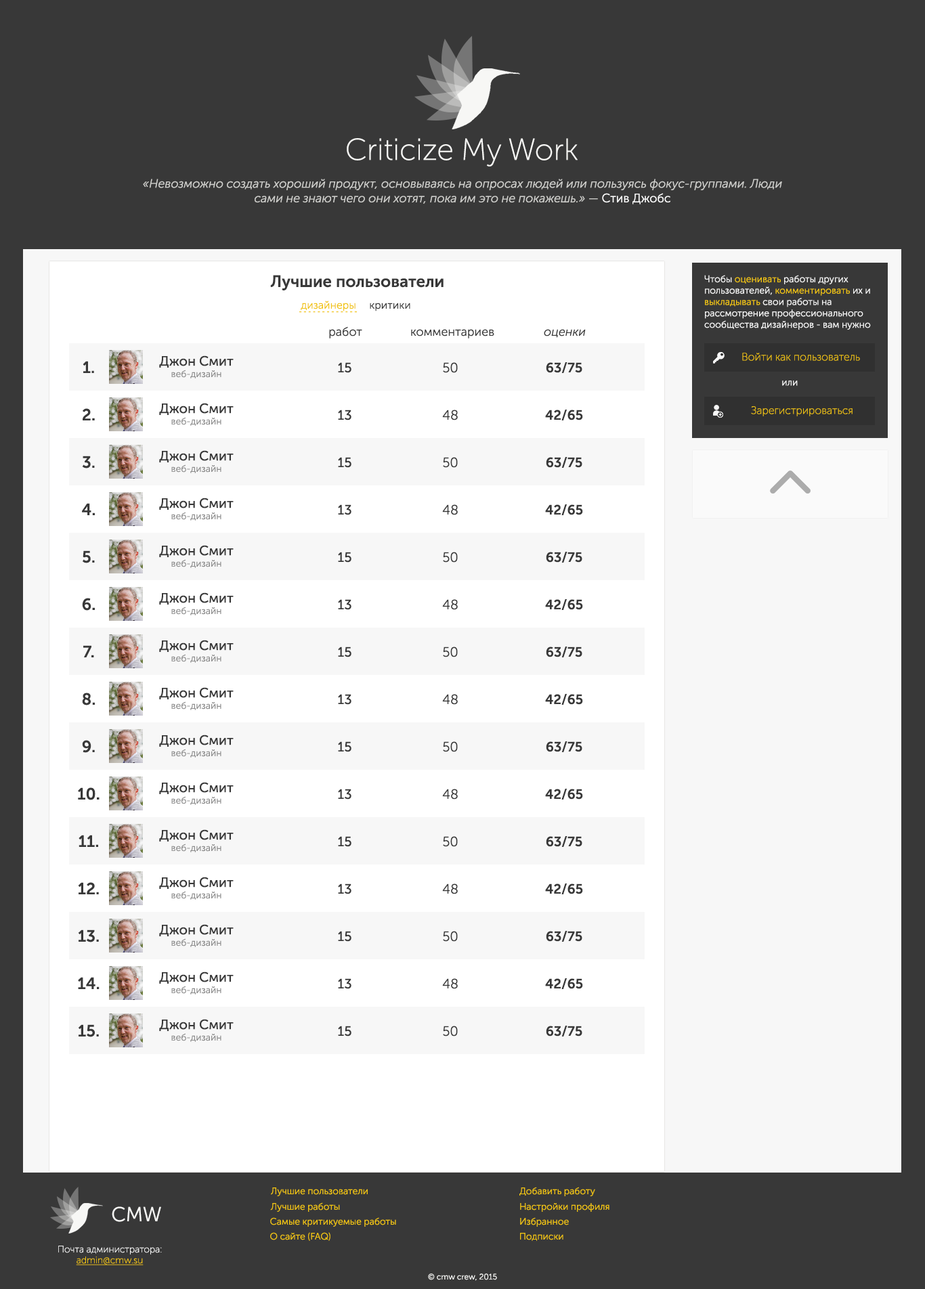
<style>
.page{position:relative;width:925px;height:1289px;background:#383838}
.page>*{position:absolute;margin:0}
.t1{font:30.5px "MuseoSansCyrl-100";color:#f7f7f5}
.t2{font:12.2px "MuseoSansCyrl-300Italic";color:#cfcfcc}
.t3{font:12.2px "MuseoSansCyrl-300";color:#cfcfcc}
.t4{font:12.2px "MuseoSansCyrl-300";color:#ffffff}
.t5{font:16.3px "MuseoSansCyrl-700";color:#383838}
.t6{font:9.5px "MuseoSansCyrl-300";color:#f7f7f7}
.t7{font:9.5px "MuseoSansCyrl-300";color:#f1c40f}
.t8{font:10.8px "MuseoSansCyrl-300";color:#f1c40f}
.t9{font:10.8px "MuseoSansCyrl-300";color:#383838}
.t10{font:6.8px "MuseoSansCyrl-500";color:#f1c40f}
.t11{font:12.2px "MuseoSansCyrl-300";color:#383838}
.t12{font:12.2px "MuseoSansCyrl-300Italic";color:#383838}
.t13{font:10.8px "MuseoSansCyrl-100";color:#f1c40f}
.t14{font:13.5px "MuseoSansCyrl-500";color:#383838}
.t15{font:13.5px "MuseoSansCyrl-300";color:#383838}
.t16{font:13.5px "MuseoSansCyrl-700";color:#383838}
.t17{font:9.5px "MuseoSansCyrl-300";color:#8c8c8c}
.t18{font:20.3px "MuseoSansCyrl-300";color:#f7f7f5}
.t19{font:9.5px "MuseoSansCyrl-100";color:#f7f7f7}
.t20{font:9.5px "MuseoSansCyrl-100";color:#f1c40f;text-decoration:underline}
.t21{font:8.1px "MuseoSansCyrl-300";color:#f7f7f5}
</style>
<div class="page">
<p class="t1" style="left:347px;top:138px;width:231px;height:29px">Criticize My Work</p>
<p class="t2" style="left:143px;top:179px;width:639px;height:25px;text-align:center">«Невозможно создать хороший продукт, основываясь на опросах людей или пользуясь фокус-группами. Люди сами не знают чего они хотят, пока им это не покажешь.» <span class="t3">— </span><span class="t4">Стив Джобс</span></p>
<p class="t5" style="left:270px;top:275px;width:174px;height:15px">Лучшие пользователи</p>
<p class="t6" style="left:704px;top:275px;width:167px;height:55px;text-align:right">Чтобы <span class="t7">оценивать</span> работы других пользователей, <span class="t7">комментировать</span> их и <span class="t7">выкладывать</span> свои работы на рассмотрение профессионального сообщества дизайнеров - вам нужно</p>
<p class="t8" style="left:301px;top:301px;width:54px;height:10px">дизайнеры</p>
<p class="t9" style="left:370px;top:303px;width:40px;height:8px">критики</p>
<p class="t10" style="left:299px;top:311px;width:58px;height:2px">- - - - - - - - - - - - -</p>
<p class="t11" style="left:329px;top:326px;width:33px;height:13px">работ</p>
<p class="t11" style="left:411px;top:329px;width:83px;height:10px">комментариев</p>
<p class="t12" style="left:544px;top:329px;width:42px;height:9px">оценки</p>
<p class="t13" style="left:742px;top:353px;width:118px;height:8px">Войти как пользователь</p>
<p class="t5" style="left:83px;top:361px;width:11px;height:12px">1.</p>
<p class="t14" style="left:159px;top:355px;width:75px;height:13px">Джон Смит</p>
<p class="t14" style="left:338px;top:362px;width:13px;height:11px">15</p>
<p class="t15" style="left:443px;top:362px;width:15px;height:11px">50</p>
<p class="t16" style="left:546px;top:362px;width:36px;height:11px">63/75</p>
<p class="t17" style="left:171px;top:370px;width:50px;height:9px">веб-дизайн</p>
<p class="t6" style="left:782px;top:381px;width:16px;height:5px">или</p>
<p class="t5" style="left:83px;top:408px;width:12px;height:12px">2.</p>
<p class="t14" style="left:159px;top:403px;width:75px;height:12px">Джон Смит</p>
<p class="t14" style="left:338px;top:410px;width:13px;height:10px">13</p>
<p class="t15" style="left:442px;top:410px;width:16px;height:10px">48</p>
<p class="t16" style="left:545px;top:410px;width:38px;height:10px">42/65</p>
<p class="t13" style="left:751px;top:406px;width:101px;height:10px">Зарегистрироваться</p>
<p class="t17" style="left:171px;top:417px;width:50px;height:9px">веб-дизайн</p>
<p class="t5" style="left:82px;top:456px;width:13px;height:13px">3.</p>
<p class="t14" style="left:159px;top:450px;width:75px;height:12px">Джон Смит</p>
<p class="t14" style="left:338px;top:457px;width:13px;height:11px">15</p>
<p class="t15" style="left:443px;top:457px;width:15px;height:11px">50</p>
<p class="t16" style="left:546px;top:457px;width:36px;height:11px">63/75</p>
<p class="t17" style="left:171px;top:464px;width:50px;height:9px">веб-дизайн</p>
<p class="t14" style="left:159px;top:498px;width:75px;height:12px">Джон Смит</p>
<p class="t5" style="left:82px;top:503px;width:13px;height:12px">4.</p>
<p class="t14" style="left:338px;top:504px;width:13px;height:11px">13</p>
<p class="t15" style="left:442px;top:504px;width:16px;height:11px">48</p>
<p class="t16" style="left:545px;top:504px;width:38px;height:11px">42/65</p>
<p class="t17" style="left:171px;top:512px;width:50px;height:9px">веб-дизайн</p>
<p class="t14" style="left:159px;top:545px;width:75px;height:12px">Джон Смит</p>
<p class="t5" style="left:83px;top:550px;width:12px;height:13px">5.</p>
<p class="t14" style="left:338px;top:552px;width:13px;height:11px">15</p>
<p class="t15" style="left:443px;top:552px;width:15px;height:11px">50</p>
<p class="t16" style="left:546px;top:552px;width:36px;height:11px">63/75</p>
<p class="t17" style="left:171px;top:559px;width:50px;height:9px">веб-дизайн</p>
<p class="t14" style="left:159px;top:592px;width:75px;height:13px">Джон Смит</p>
<p class="t5" style="left:82px;top:598px;width:13px;height:13px">6.</p>
<p class="t14" style="left:338px;top:599px;width:13px;height:11px">13</p>
<p class="t15" style="left:442px;top:599px;width:16px;height:11px">48</p>
<p class="t16" style="left:545px;top:599px;width:38px;height:11px">42/65</p>
<p class="t17" style="left:171px;top:607px;width:50px;height:8px">веб-дизайн</p>
<p class="t14" style="left:159px;top:640px;width:75px;height:12px">Джон Смит</p>
<p class="t5" style="left:83px;top:645px;width:11px;height:12px">7.</p>
<p class="t14" style="left:338px;top:647px;width:13px;height:10px">15</p>
<p class="t15" style="left:443px;top:647px;width:15px;height:10px">50</p>
<p class="t16" style="left:546px;top:647px;width:36px;height:10px">63/75</p>
<p class="t17" style="left:171px;top:654px;width:50px;height:9px">веб-дизайн</p>
<p class="t14" style="left:159px;top:687px;width:75px;height:12px">Джон Смит</p>
<p class="t5" style="left:82px;top:693px;width:13px;height:13px">8.</p>
<p class="t17" style="left:171px;top:701px;width:50px;height:9px">веб-дизайн</p>
<p class="t14" style="left:338px;top:694px;width:13px;height:11px">13</p>
<p class="t15" style="left:442px;top:694px;width:16px;height:11px">48</p>
<p class="t16" style="left:545px;top:694px;width:38px;height:11px">42/65</p>
<p class="t14" style="left:159px;top:735px;width:75px;height:12px">Джон Смит</p>
<p class="t5" style="left:82px;top:740px;width:13px;height:13px">9.</p>
<p class="t17" style="left:171px;top:749px;width:50px;height:9px">веб-дизайн</p>
<p class="t14" style="left:338px;top:741px;width:13px;height:11px">15</p>
<p class="t15" style="left:443px;top:741px;width:15px;height:11px">50</p>
<p class="t16" style="left:546px;top:741px;width:36px;height:11px">63/75</p>
<p class="t14" style="left:159px;top:782px;width:75px;height:12px">Джон Смит</p>
<p class="t5" style="left:78px;top:787px;width:22px;height:13px">10.</p>
<p class="t17" style="left:171px;top:796px;width:50px;height:9px">веб-дизайн</p>
<p class="t14" style="left:338px;top:789px;width:13px;height:11px">13</p>
<p class="t15" style="left:442px;top:789px;width:16px;height:11px">48</p>
<p class="t16" style="left:545px;top:789px;width:38px;height:11px">42/65</p>
<p class="t14" style="left:159px;top:829px;width:75px;height:13px">Джон Смит</p>
<p class="t5" style="left:79px;top:835px;width:19px;height:12px">11.</p>
<p class="t17" style="left:171px;top:844px;width:50px;height:8px">веб-дизайн</p>
<p class="t14" style="left:338px;top:836px;width:13px;height:11px">15</p>
<p class="t15" style="left:443px;top:836px;width:15px;height:11px">50</p>
<p class="t16" style="left:546px;top:836px;width:36px;height:11px">63/75</p>
<p class="t14" style="left:159px;top:877px;width:75px;height:12px">Джон Смит</p>
<p class="t5" style="left:78px;top:882px;width:21px;height:12px">12.</p>
<p class="t17" style="left:171px;top:891px;width:50px;height:9px">веб-дизайн</p>
<p class="t14" style="left:338px;top:884px;width:13px;height:10px">13</p>
<p class="t15" style="left:442px;top:884px;width:16px;height:10px">48</p>
<p class="t16" style="left:545px;top:884px;width:38px;height:10px">42/65</p>
<p class="t5" style="left:78px;top:930px;width:21px;height:13px">13.</p>
<p class="t14" style="left:159px;top:924px;width:75px;height:12px">Джон Смит</p>
<p class="t17" style="left:171px;top:938px;width:50px;height:9px">веб-дизайн</p>
<p class="t14" style="left:338px;top:931px;width:13px;height:11px">15</p>
<p class="t15" style="left:443px;top:931px;width:15px;height:11px">50</p>
<p class="t16" style="left:546px;top:931px;width:36px;height:11px">63/75</p>
<p class="t5" style="left:78px;top:977px;width:22px;height:12px">14.</p>
<p class="t14" style="left:159px;top:972px;width:75px;height:12px">Джон Смит</p>
<p class="t17" style="left:171px;top:986px;width:50px;height:9px">веб-дизайн</p>
<p class="t14" style="left:338px;top:978px;width:13px;height:11px">13</p>
<p class="t15" style="left:442px;top:978px;width:16px;height:11px">48</p>
<p class="t16" style="left:545px;top:978px;width:38px;height:11px">42/65</p>
<p class="t5" style="left:78px;top:1024px;width:21px;height:13px">15.</p>
<p class="t14" style="left:159px;top:1019px;width:75px;height:12px">Джон Смит</p>
<p class="t14" style="left:338px;top:1026px;width:13px;height:11px">15</p>
<p class="t15" style="left:443px;top:1026px;width:15px;height:11px">50</p>
<p class="t16" style="left:546px;top:1026px;width:36px;height:11px">63/75</p>
<p class="t17" style="left:171px;top:1033px;width:50px;height:9px">веб-дизайн</p>
<p class="t7" style="left:271px;top:1188px;width:97px;height:8px">Лучшие пользователи</p>
<p class="t7" style="left:519px;top:1187px;width:76px;height:9px">Добавить работу</p>
<p class="t7" style="left:270px;top:1203px;width:70px;height:9px">Лучшие работы</p>
<p class="t7" style="left:520px;top:1203px;width:89px;height:9px">Настройки профиля</p>
<p class="t18" style="left:112px;top:1207px;width:49px;height:15px">CMW</p>
<p class="t7" style="left:270px;top:1217px;width:126px;height:10px">Самые критикуемые работы</p>
<p class="t7" style="left:520px;top:1217px;width:49px;height:10px">Избранное</p>
<p class="t7" style="left:270px;top:1232px;width:60px;height:9px">О сайте (FAQ)</p>
<p class="t7" style="left:520px;top:1233px;width:43px;height:8px">Подписки</p>
<p class="t19" style="left:58px;top:1246px;width:104px;height:9px">Почта администратора:</p>
<p class="t20" style="left:76px;top:1257px;width:68px;height:9px">admin@cmw.su</p>
<p class="t21" style="left:428px;top:1274px;width:69px;height:7px">© cmw crew, 2015</p>
</div>
